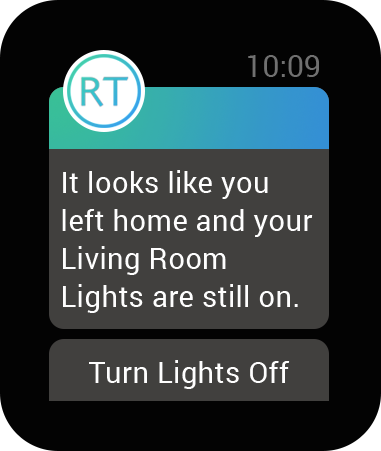
<style>
.page{position:relative;width:381px;height:451px;background:#030303}
.page>*{position:absolute;margin:0}
.t1{font:30px "Roboto-Regular";color:#707070}
.t2{font:29.4px/38px "Roboto-Regular";letter-spacing:0.01em;color:#fefefe}
.t3{font:29.4px "Roboto-Regular";letter-spacing:0.01em;color:#fefefe}
</style>
<div class="page">
<p class="t1" style="left:248px;top:55px;width:71px;height:22px">10:09</p>
<p class="t2" style="left:62px;top:170px;width:251px;height:143px">It looks like you<br>left home and your<br>Living Room<br>Lights are still on.</p>
<p class="t3" style="left:89px;top:360px;width:201px;height:29px">Turn Lights Off</p>
</div>
